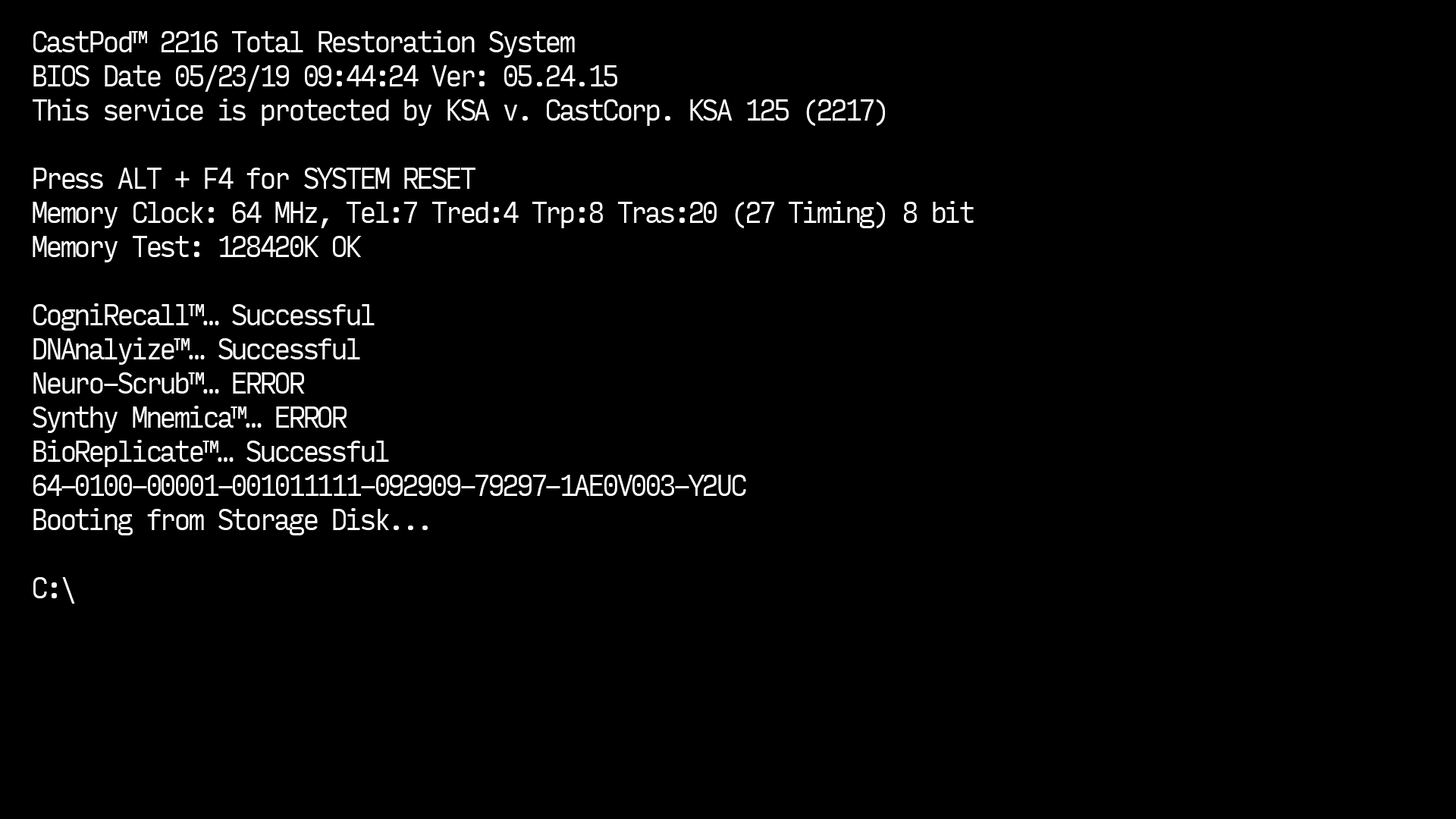
<style>
.page{position:relative;width:1456px;height:819px;background:#000000}
.page>*{position:absolute;margin:0}
.t1{font:28.4px "InputMonoNarrow-Light";letter-spacing:-0.1em;color:#ffffff}
</style>
<div class="page">
<p class="t1" style="left:33px;top:30px;width:941px;height:574px">CastPod™ 2216 Total Restoration System<br>BIOS Date 05/23/19 09:44:24 Ver: 05.24.15<br>This service is protected by KSA v. CastCorp. KSA 125 (2217)<br><br>Press ALT + F4 for SYSTEM RESET<br>Memory Clock: 64 MHz, Tel:7 Tred:4 Trp:8 Tras:20 (27 Timing) 8 bit<br>Memory Test: 128420K OK<br><br>CogniRecall™… Successful<br>DNAnalyize™… Successful<br>Neuro-Scrub™… ERROR<br>Synthy Mnemica™… ERROR<br>BioReplicate™… Successful<br>64-0100-00001-001011111-092909-79297-1AE0V003-Y2UC<br>Booting from Storage Disk...<br><br>C:\</p>
</div>
